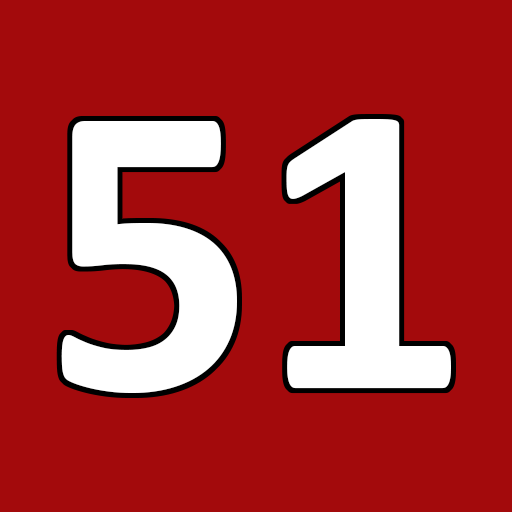
<style>
.page{position:relative;width:512px;height:512px;background:#a30a0c}
.page>*{position:absolute;margin:0}
.t1{font:423.3px "Calibri-Bold";color:#ffffff}
</style>
<div class="page">
<p class="t1" style="left:61px;top:119px;width:390px;height:274px">51</p>
</div>
